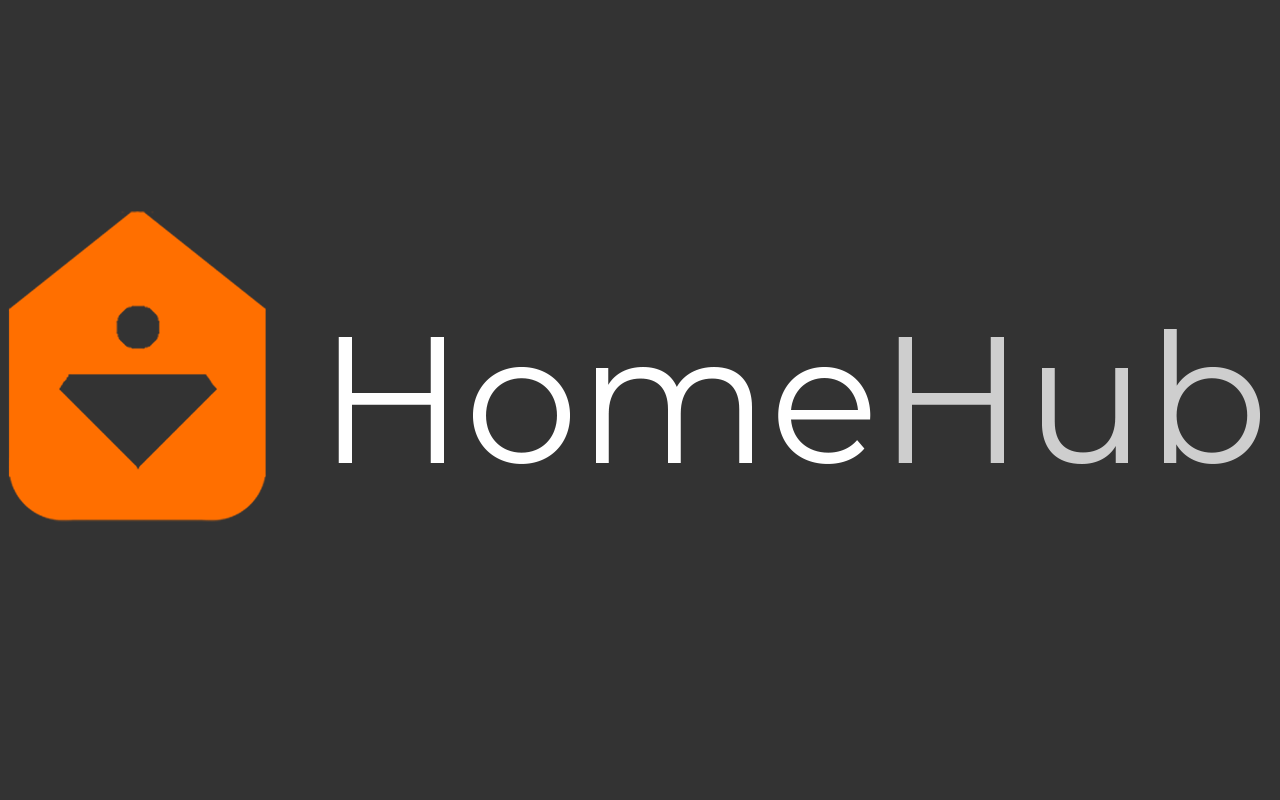
<style>
.page{position:relative;width:1280px;height:800px;background:#333333}
.page>*{position:absolute;margin:0}
.t1{font:180.3px "Montserrat-Regular";color:#ffffff}
.t2{font:180.3px "Montserrat-Regular";color:#cecece}
</style>
<div class="page">
<p class="t1" style="left:338px;top:329px;width:922px;height:135px">Home<span class="t2">Hub</span></p>
</div>
